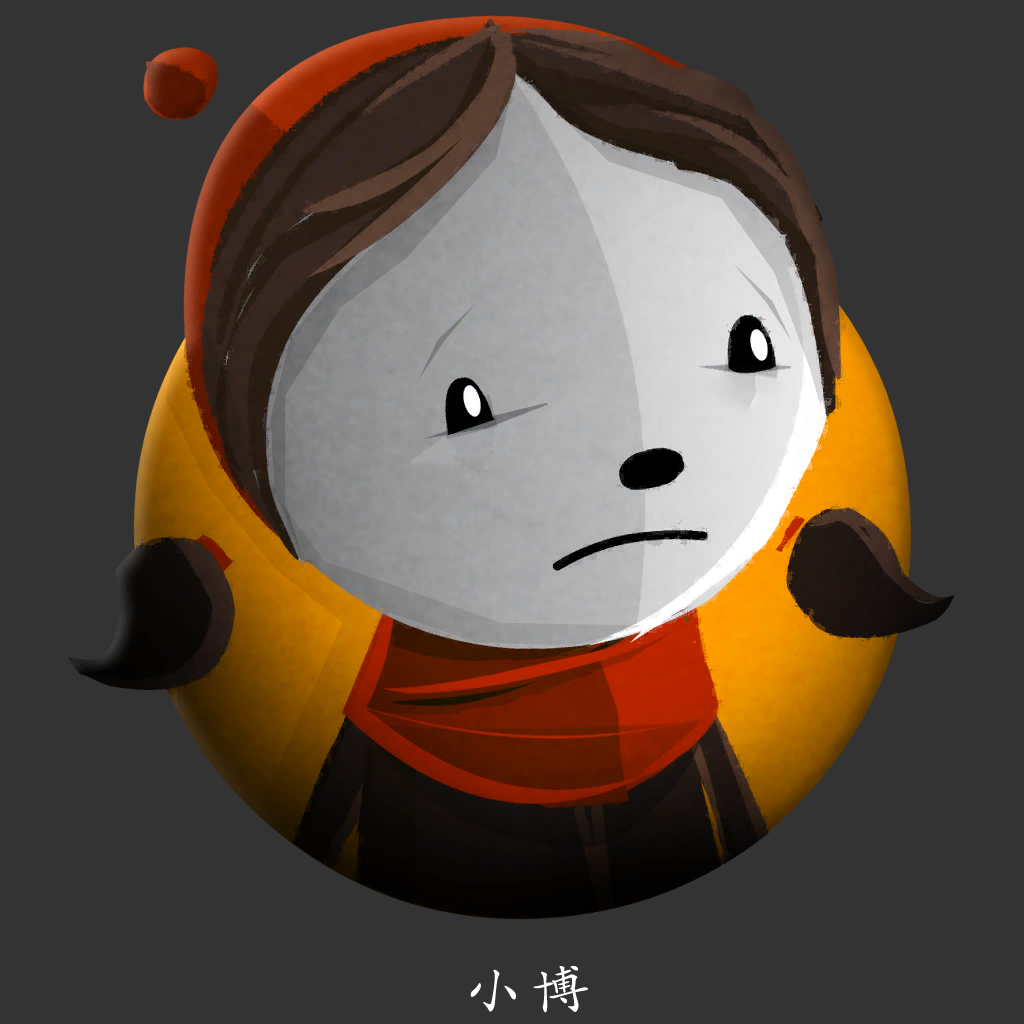
<style>
.page{position:relative;width:1024px;height:1024px;background:#333333}
.page>*{position:absolute;margin:0}
.t1{font:53.3px "STKaiti";letter-spacing:0.1em;color:#ffffff}
</style>
<div class="page">
<p class="t1" style="left:470px;top:966px;width:118px;height:47px">小博</p>
</div>
